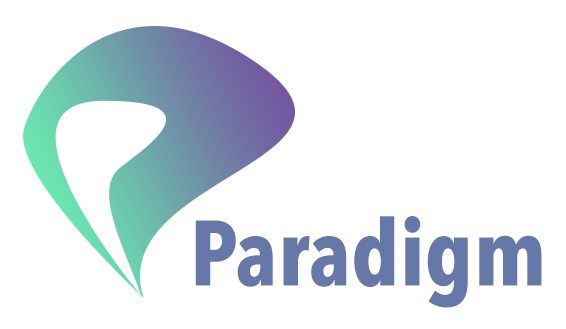
<style>
.page{position:relative;width:566px;height:329px;background:#ffffff}
.page>*{position:absolute;margin:0}
.t1{font:91.7px "AvenirNextCondensed-Bold";color:#6678a7}
</style>
<div class="page">
<p class="t1" style="left:195px;top:216px;width:347px;height:92px">Paradigm</p>
</div>
